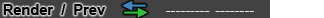
<style>
.page{position:relative;width:324px;height:18px;background:#424242}
.page>*{position:absolute;margin:0}
.t1{font:14.6px "Arial-BoldMT";color:#000000}
.t2{font:14.6px "ArialMT";color:#e5e5e5}
</style>
<div class="page">
<p class="t1" style="left:3px;top:4px;width:102px;height:11px">Render  /  Prev</p>
<p class="t2" style="left:166px;top:11px;width:44px;height:1px">---------</p>
<p class="t2" style="left:215px;top:11px;width:39px;height:1px">--------</p>
</div>
